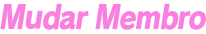
<style>
.page{position:relative;width:206px;height:34px;background:#ffffff}
.page>*{position:absolute;margin:0}
.t1{font:32px "RodinPro-EB";letter-spacing:-0.051em;color:#f980de;font-style:italic;scale:0.87 1}
</style>
<div class="page">
<p class="t1" style="left:0px;top:3px;width:206px;height:27px">Mudar Membro</p>
</div>
